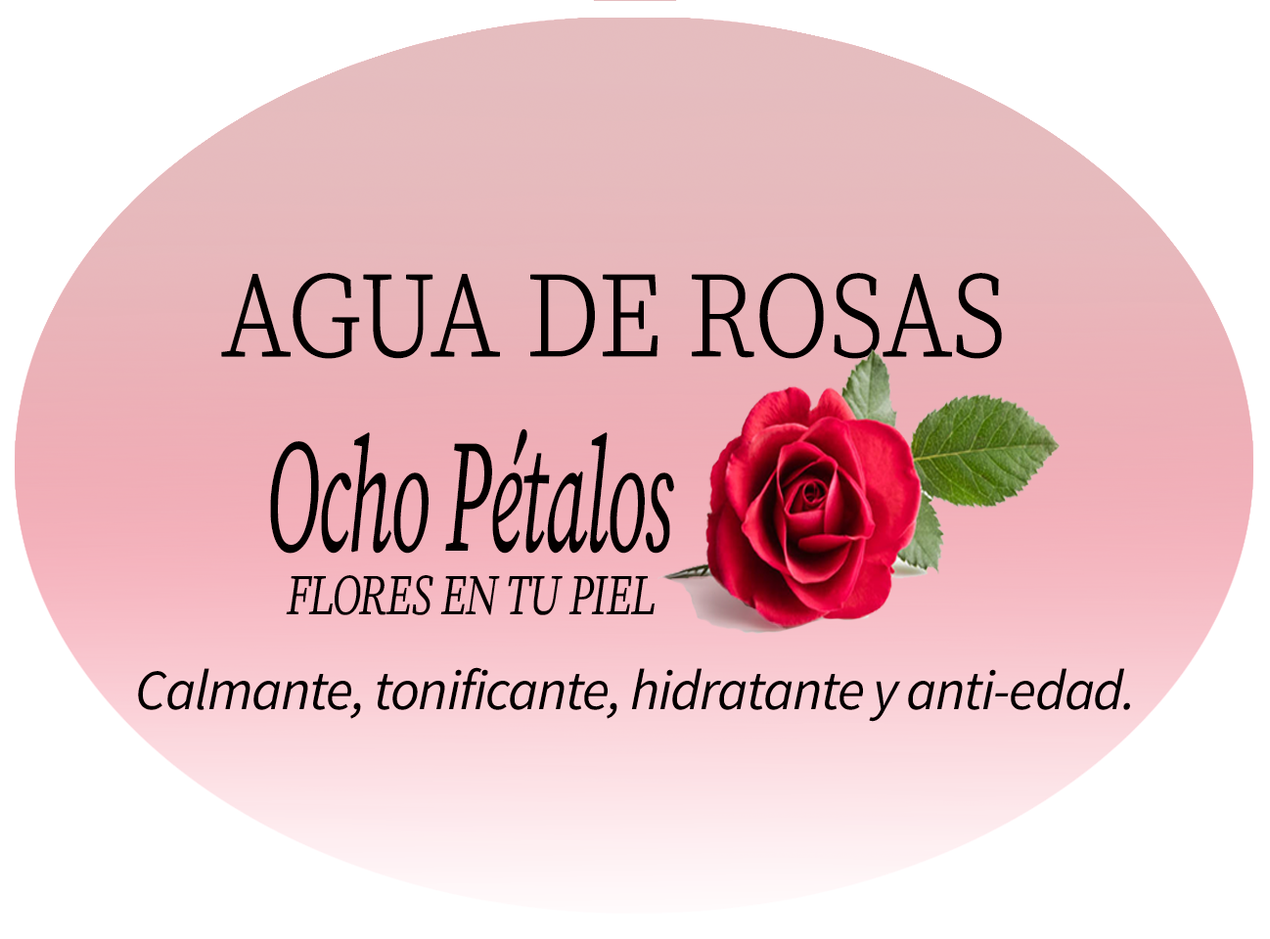
<style>
.page{position:relative;width:1270px;height:939px;background:#ffffff}
.page>*{position:absolute;margin:0}
.t1{font:119.6px "SourceSerifPro-Light";letter-spacing:-0.025em;color:#030000;font-weight:bold;scale:0.88 1}
.t2{font:159.8px "SourceSerifPro-It";letter-spacing:-0.025em;color:#030000;scale:0.51 1}
.t3{font:57.1px "SourceSerifPro-It";letter-spacing:-0.025em;color:#020000;scale:0.77 1}
.t4{font:57.1px "SourceSansPro-It";letter-spacing:-0.025em;color:#020000}
</style>
<div class="page">
<p class="t1" style="left:221px;top:273px;width:781px;height:86px">AGUA DE ROSAS</p>
<p class="t2" style="left:270px;top:428px;width:404px;height:126px">Ocho Pétalos</p>
<p class="t3" style="left:286px;top:575px;width:368px;height:40px">FLORES EN TU PIEL</p>
<p class="t4" style="left:138px;top:667px;width:992px;height:55px">Calmante, tonificante, hidratante y anti-edad.</p>
</div>
